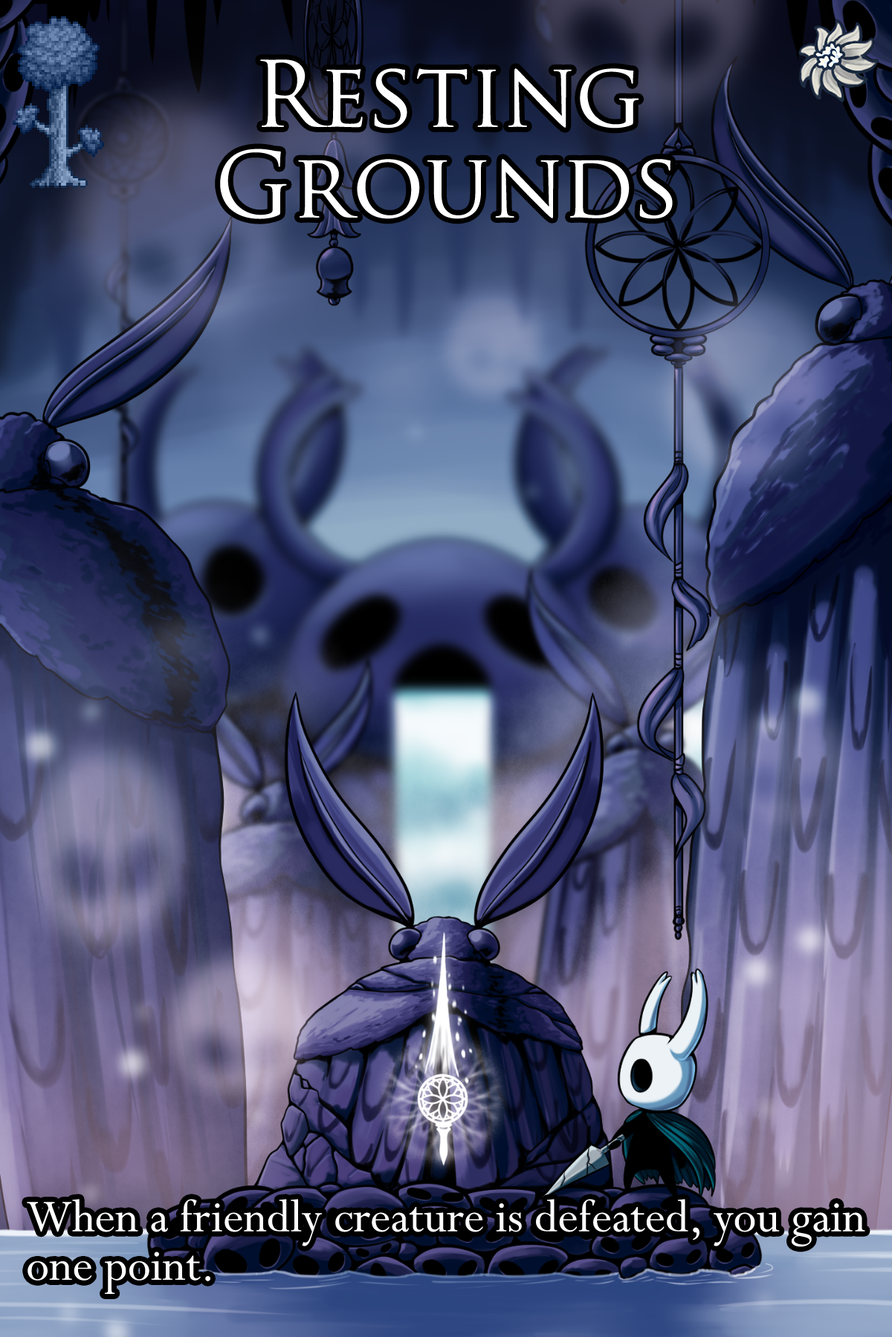
<style>
.page{position:relative;width:892px;height:1337px}
.page>*{position:absolute;margin:0}
.t1{font:152.7px/90.6px "TrajanPro-Regular";color:#ffffff}
.t2{font:86.9px/48.6px "Perpetua";color:#ffffff}
</style>
<div class="page">
<p class="t1" style="left:220px;top:59px;width:452px;height:160px;text-align:center">Resting<br>Grounds</p>
<p class="t2" style="left:27px;top:1199px;width:838px;height:95px">When a friendly creature is defeated, you gain<br>one point.</p>
</div>
